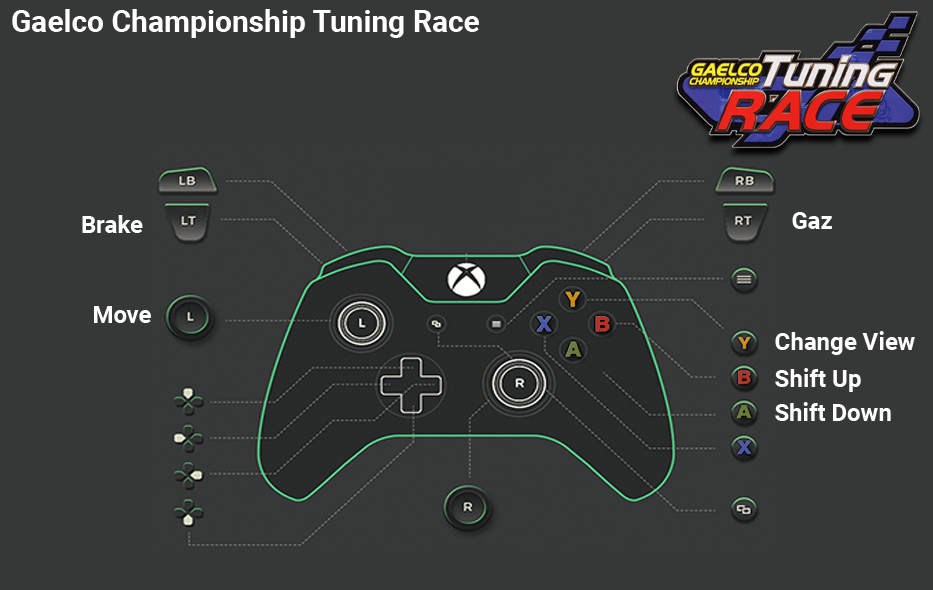
<style>
.page{position:relative;width:933px;height:590px;background:#363838}
.page>*{position:absolute;margin:0}
.t1{font:30px "Roboto-Bold";color:#ffffff}
.t2{font:24px "Roboto-Bold";color:#ffffff}
</style>
<div class="page">
<p class="t1" style="left:12px;top:9px;width:467px;height:29px">Gaelco Championship Tuning Race</p>
<p class="t2" style="left:82px;top:215px;width:61px;height:18px">Brake</p>
<p class="t2" style="left:792px;top:212px;width:40px;height:17px">Gaz</p>
<p class="t2" style="left:94px;top:306px;width:57px;height:17px">Move</p>
<p class="t2" style="left:775px;top:331px;width:140px;height:24px">Change View</p>
<p class="t2" style="left:775px;top:368px;width:86px;height:24px">Shift Up</p>
<p class="t2" style="left:775px;top:402px;width:116px;height:19px">Shift Down</p>
</div>
